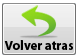
<style>
.page{position:relative;width:77px;height:55px}
.page>*{position:absolute;margin:0}
.t1{font:13px "MyriadPro-Bold";color:#010101}
</style>
<div class="page">
<p class="t1" style="left:4px;top:40px;width:69px;height:10px">Volver atras</p>
</div>
